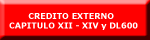
<style>
.page{position:relative;width:150px;height:40px;background:#ff0000}
.page>*{position:absolute;margin:0}
.t1{font:8px "Verdana-Bold";color:#ffffff}
</style>
<div class="page">
<p class="t1" style="left:9px;top:13px;width:129px;height:17px">CREDITO EXTERNO <br>CAPITULO XII - XIV y DL600</p>
</div>
